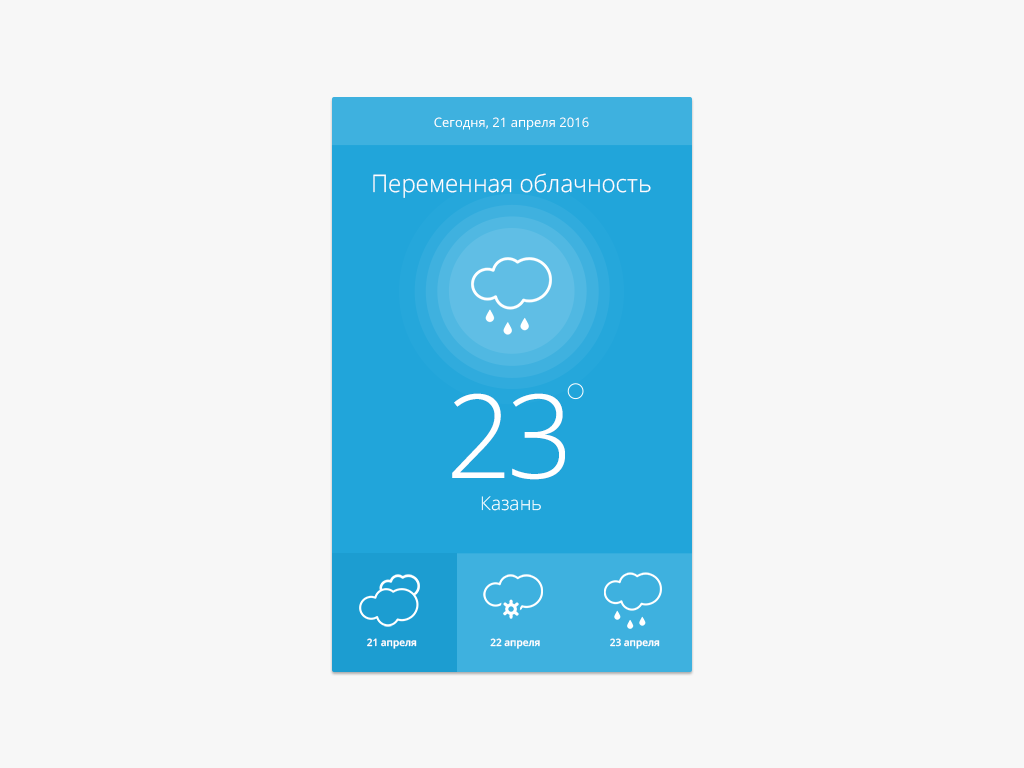
<style>
.page{position:relative;width:1024px;height:768px;background:#f7f7f7}
.page>*{position:absolute;margin:0}
.t1{font:13px "OpenSans";color:#ffffff}
.t2{font:24.1px "OpenSans-Light";color:#ffffff}
.t3{font:116.2px "OpenSans-Light";letter-spacing:-0.05em;color:#ffffff}
.t4{font:19.1px "OpenSans-Light";color:#ffffff}
.t5{font:10px "OpenSans-Semibold";color:#ffffff}
</style>
<div class="page">
<p class="t1" style="left:434px;top:117px;width:155px;height:13px">Сегодня, 21 апреля 2016</p>
<p class="t2" style="left:373px;top:173px;width:278px;height:25px">Переменная облачность</p>
<p class="t3" style="left:452px;top:393px;width:113px;height:87px">23</p>
<p class="t4" style="left:481px;top:496px;width:60px;height:15px">Казань</p>
<p class="t5" style="left:367px;top:638px;width:50px;height:11px">21 апреля</p>
<p class="t5" style="left:490px;top:638px;width:50px;height:11px">22 апреля</p>
<p class="t5" style="left:610px;top:638px;width:50px;height:11px">23 апреля</p>
</div>
